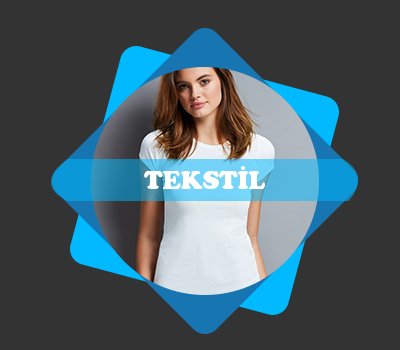
<style>
.page{position:relative;width:400px;height:350px;background:#333333}
.page>*{position:absolute;margin:0}
.t1{font:25px "CooperBlackStd";color:#ffffff}
</style>
<div class="page">
<p class="t1" style="left:144px;top:170px;width:121px;height:20px">TEKSTIL</p>
</div>
